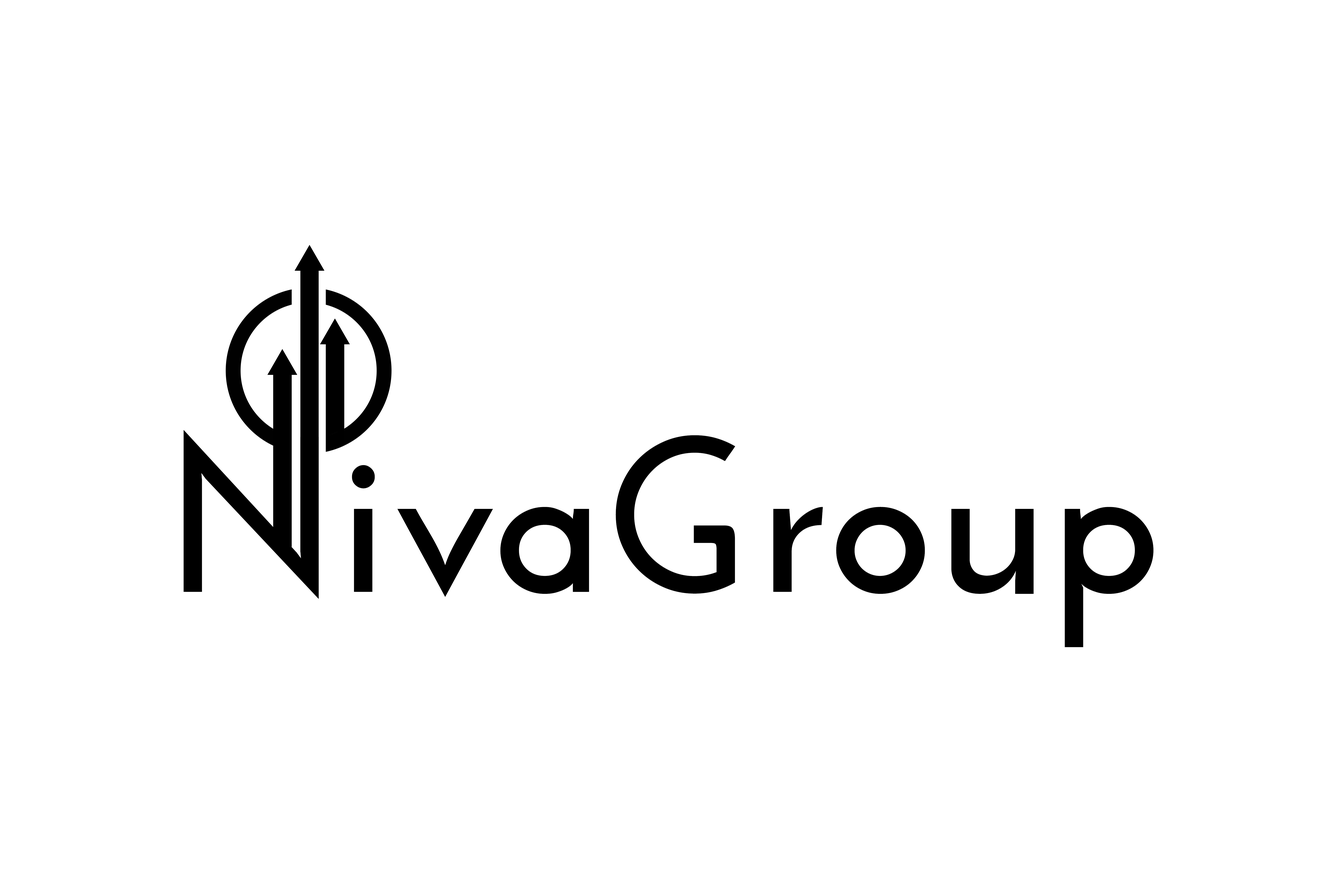
<style>
.page{position:relative;width:1337px;height:892px;background:#ffffff}
.page>*{position:absolute;margin:0}
.t1{font:221px "JosefinSans-Bold";color:#000000}
</style>
<div class="page">
<p class="t1" style="left:184px;top:430px;width:970px;height:217px">NivaGroup</p>
</div>
